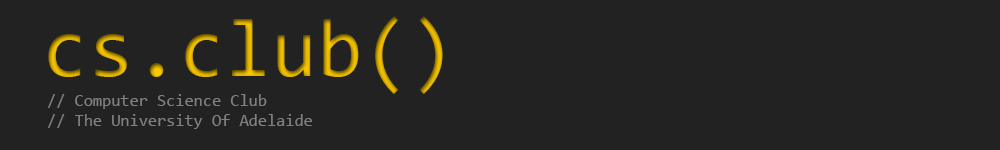
<style>
.page{position:relative;width:1000px;height:150px;background:#222222}
.page>*{position:absolute;margin:0}
.t1{font:83.3px "Consolas"}
.t2{font:16.7px "Consolas";color:#818181}
</style>
<div class="page">
<p class="t1" style="left:48px;top:16px;width:395px;height:78px">cs.club()</p>
<p class="t2" style="left:48px;top:94px;width:264px;height:35px">// Computer Science Club<br>// The University Of Adelaide</p>
</div>
